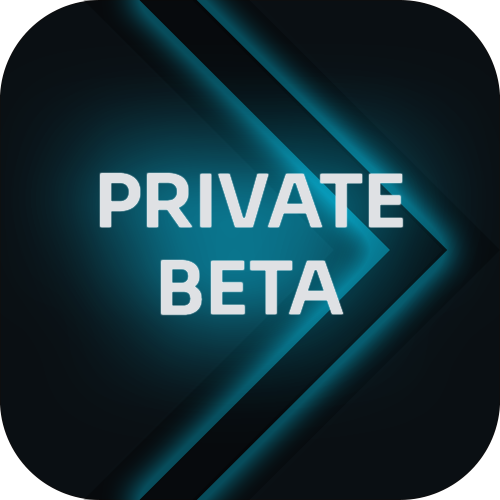
<style>
.page{position:relative;width:500px;height:500px}
.page>*{position:absolute;margin:0}
.t1{font:72.8px "Sora-SemiBold";color:#dfe1e4}
</style>
<div class="page">
<p class="t1" style="left:100px;top:173px;width:303px;height:142px;text-align:center">PRIVATE<br>BETA</p>
</div>
